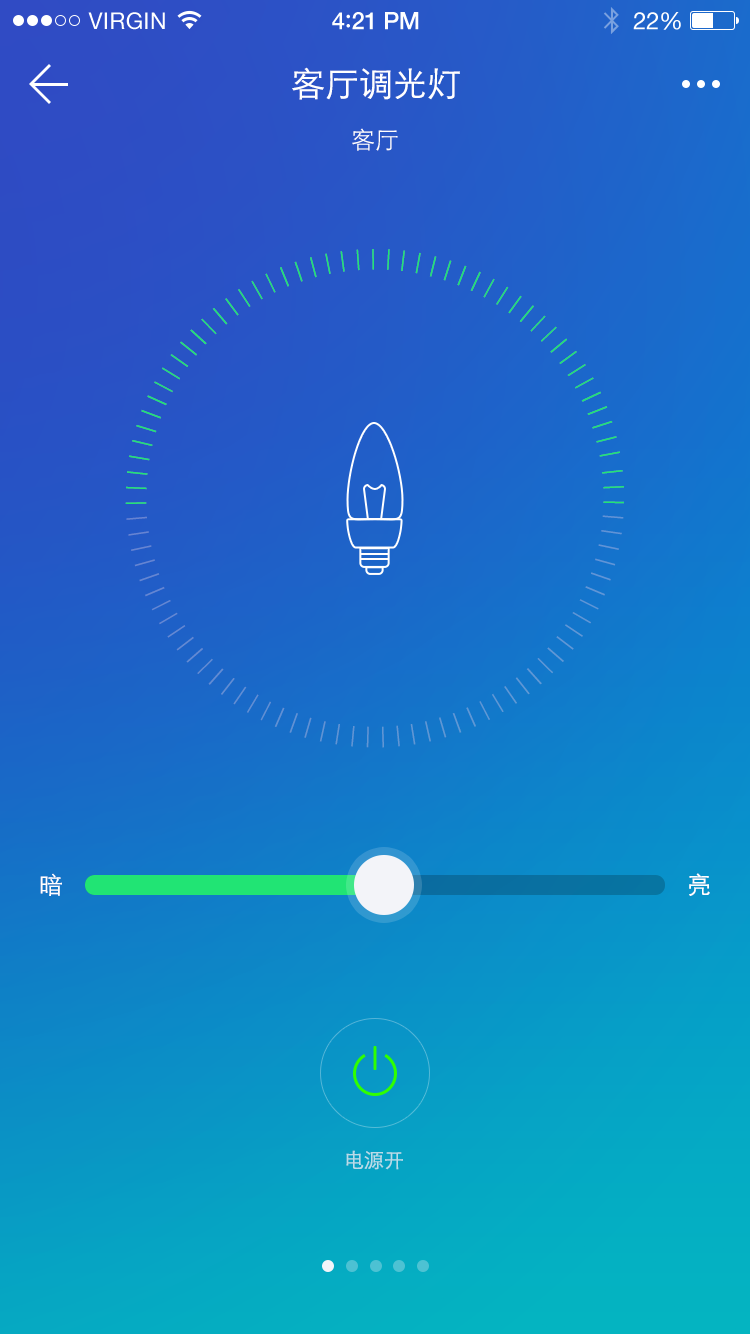
<style>
.page{position:relative;width:750px;height:1334px}
.page>*{position:absolute;margin:0}
.t1{font:34px "STXihei";color:#ffffff}
.t2{font:24px "STXihei";color:#ffffff}
.t3{font:22.1px "STXihei";letter-spacing:-0.005em}
.t4{font:20px "STXihei";color:#b9dde9}
</style>
<div class="page">
<p class="t1" style="left:292px;top:67px;width:168px;height:33px">客厅调光灯</p>
<p class="t2" style="left:352px;top:128px;width:46px;height:23px">客厅</p>
<p class="t3" style="left:125px;top:249px;width:499px;height:499px;rotate:90deg">||||||||||||||||||||||||||||||||||||||||||||||||||||||||||||||||||||||||||||||||||||||||||||||||||||||||||||||||||||||||||||||||||||||||||||||||||||||||||||||||||||||||||||||||||||||||||||||||||||||||||||||||||||||||||||||||||||||||||||||||</p>
<p class="t2" style="left:40px;top:873px;width:22px;height:23px">暗</p>
<p class="t2" style="left:689px;top:873px;width:21px;height:23px">亮</p>
<p class="t4" style="left:346px;top:1150px;width:57px;height:20px">电源开</p>
</div>
